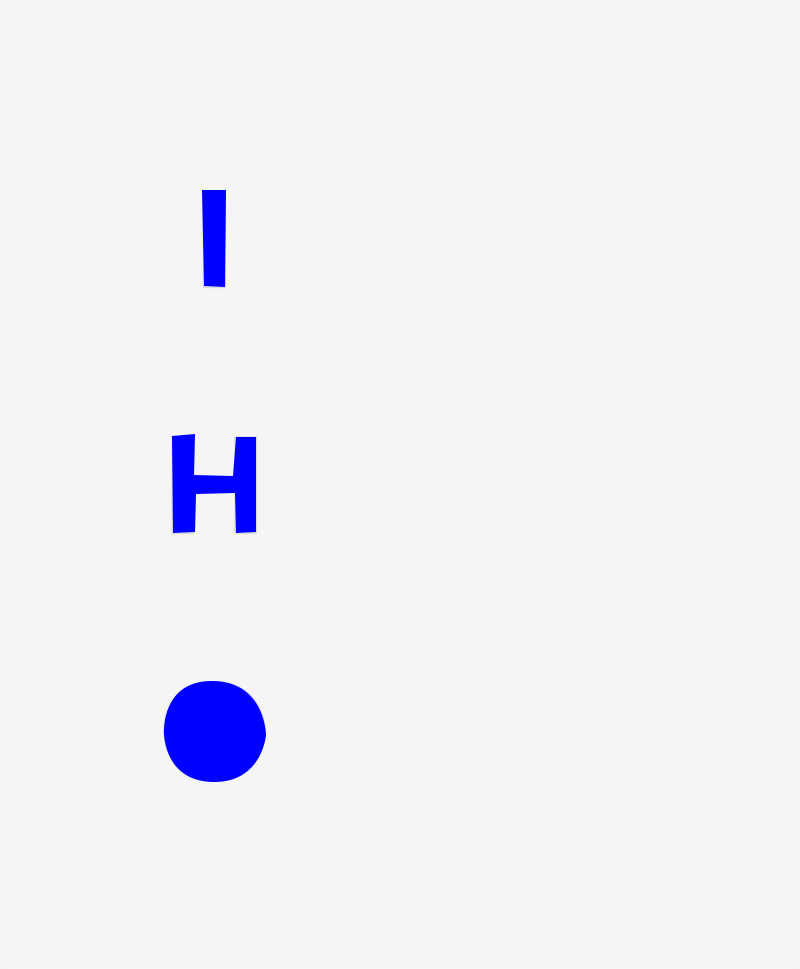
<style>
.page{position:relative;width:800px;height:969px;background:#f5f5f5}
.page>*{position:absolute;margin:0}
.t1{font:134.7px/246.1px "Lato-Black";color:#0000ff;text-transform:uppercase}
</style>
<div class="page">
<p class="t1" style="left:163px;top:189px;width:103px;height:593px;text-align:center">I<br>H<br>O</p>
</div>
